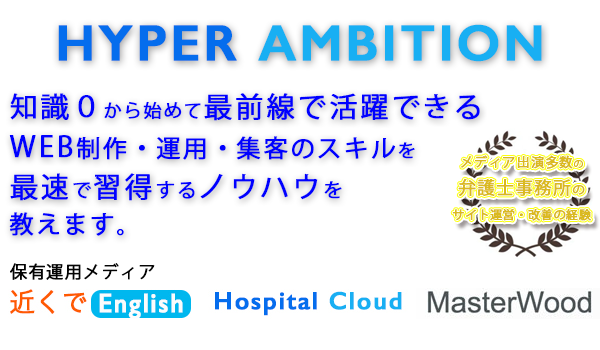
<style>
.page{position:relative;width:600px;height:350px;background:#ffffff}
.page>*{position:absolute;margin:0}
.t1{font:51px "GillSans-SemiBold";letter-spacing:0.05em;color:#18aff3;font-weight:bold}
.t2{font:51px "GillSans-SemiBold";letter-spacing:0.05em;color:#056ded;font-weight:bold}
.t3{font:28px/40px "KozGoPr6N-Regular";letter-spacing:0.09em;color:#0000ff;font-weight:bold}
.t4{font:18px/40px "KozGoPr6N-Regular";letter-spacing:0.09em;color:#0000ff;font-weight:bold}
.t5{font:24px/40px "KozGoPr6N-Regular";letter-spacing:0.09em;color:#0000ff;font-weight:bold}
.t6{font:19px/40px "KozGoPr6N-Regular";letter-spacing:0.09em;color:#0000ff;font-weight:bold}
.t7{font:20px/40px "KozGoPr6N-Regular";letter-spacing:0.09em;color:#0000ff;font-weight:bold}
.t8{font:11.7px "KozGoPr6N-Regular";letter-spacing:0.05em;color:#dab91f;font-weight:bold}
.t9{font:13.2px "KozGoPr6N-Regular";letter-spacing:0.05em;color:#dab91f;font-weight:bold}
.t10{font:9.5px "KozGoPr6N-Regular";letter-spacing:0.05em;color:#dab91f;font-weight:bold}
.t11{font:17.5px "KozGoPr6N-Regular";letter-spacing:0.05em;color:#dab91f;font-weight:bold}
.t12{font:12.4px "KozGoPr6N-Regular";letter-spacing:0.05em;color:#dab91f;font-weight:bold}
.t13{font:17px "KozGoPr6N-Regular";letter-spacing:0.05em;color:#040404;font-weight:bold}
</style>
<div class="page">
<p class="t1" style="left:58px;top:24px;width:484px;height:38px"><span class="t2">HYPER </span>AMBITION</p>
<p class="t3" style="left:9px;top:93px;width:471px;height:143px">知識０<span class="t4">から始めて</span>最前線で活躍できる<br>WEB<span class="t5">制作・運用・集客のスキル</span><span class="t4">を<br></span>最速<span class="t6">で</span>習得<span class="t6">する</span>ノウハウ<span class="t6">を<br></span><span class="t5">教えます</span><span class="t7">。</span></p>
<p class="t8" style="left:452px;top:155px;width:139px;height:66px;text-align:center"><span class="t9">メディア出演多数</span><span class="t10">の<br></span><span class="t11">弁護士事務所</span><span class="t12">の<br></span>サイト運営・改善の経験</p>
<p class="t13" style="left:10px;top:263px;width:145px;height:17px">保有運用メディア</p>
</div>
